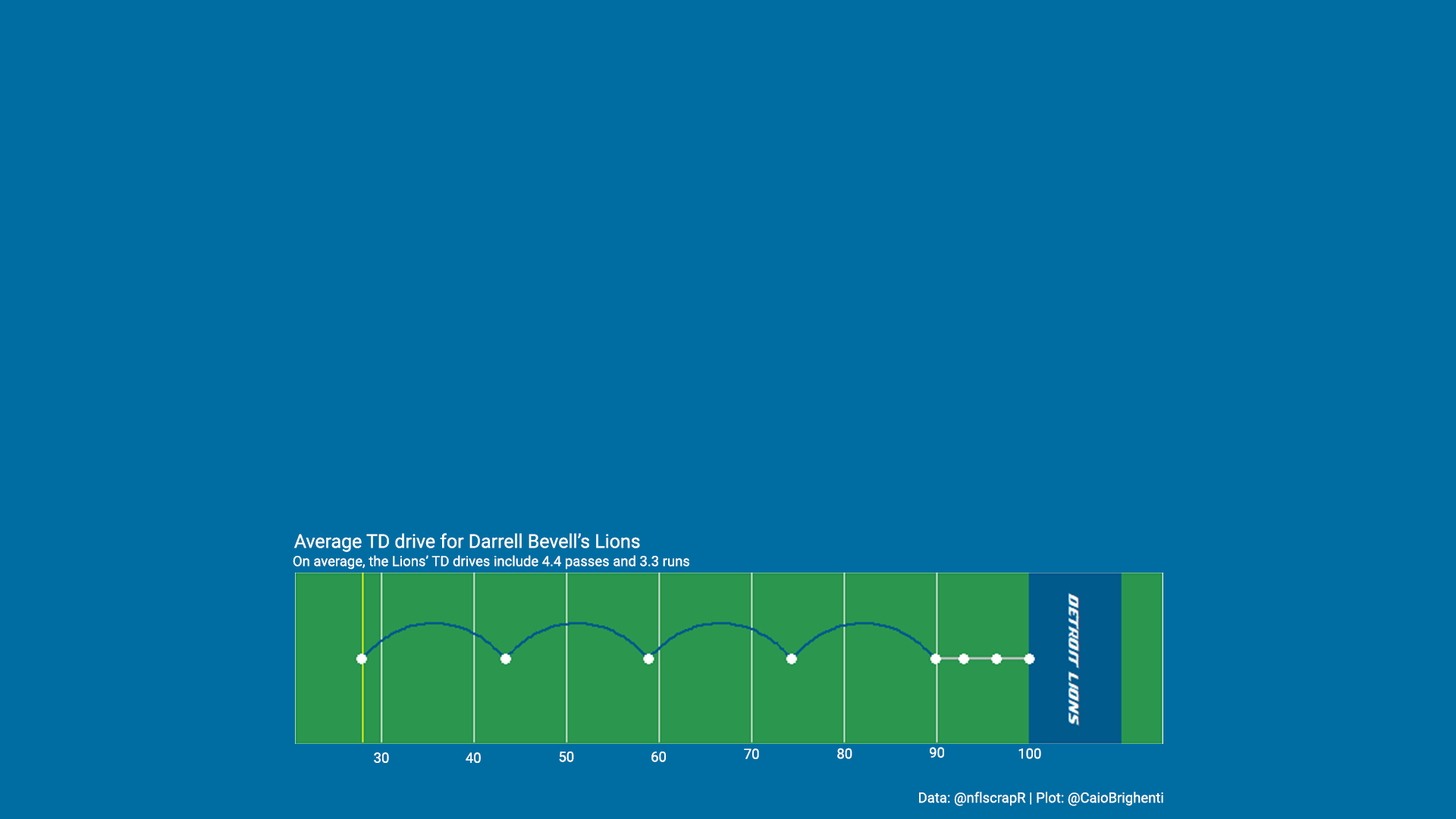
<style>
.page{position:relative;width:1456px;height:819px;background:#006da2}
.page>*{position:absolute;margin:0}
.t1{font:18.9px "Roboto-Regular";color:#ffffff}
.t2{font:14px "Roboto-Regular";color:#ffffff}
</style>
<div class="page">
<p class="t1" style="left:294px;top:533px;width:346px;height:19px">Average TD drive for Darrell Bevell’s Lions</p>
<p class="t2" style="left:293px;top:555px;width:396px;height:15px">On average, the Lions’ TD drives include 4.4 passes and 3.3 runs</p>
<p class="t2" style="left:744px;top:748px;width:15px;height:11px">70</p>
<p class="t2" style="left:837px;top:748px;width:15px;height:11px">80</p>
<p class="t2" style="left:930px;top:747px;width:14px;height:11px">90</p>
<p class="t2" style="left:1018px;top:748px;width:23px;height:11px">100</p>
<p class="t2" style="left:374px;top:752px;width:15px;height:11px">30</p>
<p class="t2" style="left:466px;top:752px;width:15px;height:11px">40</p>
<p class="t2" style="left:559px;top:751px;width:15px;height:11px">50</p>
<p class="t2" style="left:651px;top:751px;width:15px;height:11px">60</p>
<p class="t2" style="left:919px;top:792px;width:244px;height:14px">Data: @nflscrapR | Plot: @CaioBrighenti</p>
</div>
